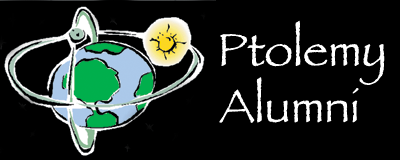
<style>
.page{position:relative;width:400px;height:160px;background:#000000}
.page>*{position:absolute;margin:0}
.t1{font:47px "Papyrus";color:#ffffff}
.t2{font:36px "Papyrus";color:#ffffff}
</style>
<div class="page">
<p class="t1" style="left:219px;top:20px;width:166px;height:103px"><span class="t2"> </span>Ptolemy<br> Alumni</p>
</div>
